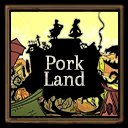
<style>
.page{position:relative;width:128px;height:128px;background:#000000}
.page>*{position:absolute;margin:0}
.t1{font:21.3px/16px "Arapey-Regular";color:#e3dfcc}
</style>
<div class="page">
<p class="t1" style="left:44px;top:55px;width:41px;height:31px;text-align:center">Pork<br>Land</p>
</div>
